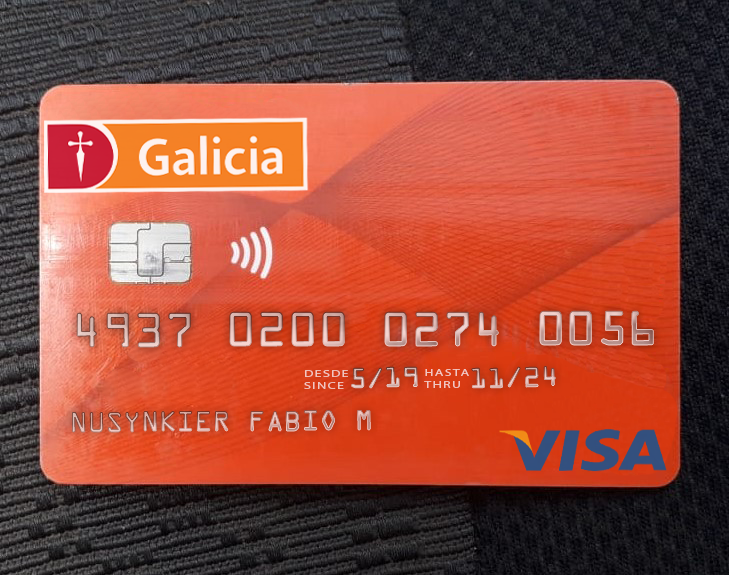
<style>
.page{position:relative;width:729px;height:575px}
.page>*{position:absolute;margin:0}
.t1{font:52px "OCRAExtended"}
.t2{font:30px "OCRAExtended"}
.t3{font:9.6px "MyriadPro-Regular";letter-spacing:0.1em;color:#f1c7c2;scale:1.45 1}
.t4{font:30px "OCRAExtended";color:#dabab6}
.t5{font:9.6px "MyriadPro-Regular";letter-spacing:0.1em;color:#f2c7c1;scale:1.45 1}
</style>
<div class="page">
<p class="t1" style="left:77px;top:311px;width:577px;height:36px">4937 0200 0274 0056</p>
<p class="t2" style="left:472px;top:366px;width:84px;height:22px;rotate:-1deg">11/24</p>
<p class="t3" style="left:304px;top:370px;width:44px;height:19px">DESDE<br>SINCE</p>
<p class="t4" style="left:351px;top:367px;width:67px;height:21px;rotate:-1deg">5/19</p>
<p class="t5" style="left:424px;top:369px;width:45px;height:19px">HASTA<br>THRU</p>
<p class="t2" style="left:72px;top:410px;width:299px;height:22px">NUSYNKIER FABIO M</p>
</div>
